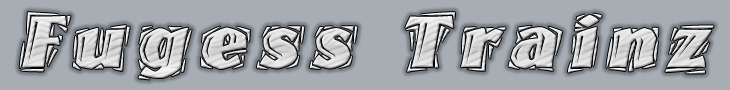
<style>
.page{position:relative;width:730px;height:90px;background:#a8adb4}
.page>*{position:absolute;margin:0}
.t1{font:88px "WestwoodLetPlain";letter-spacing:0.08em;color:#dddddd;font-weight:bold;font-style:italic}
</style>
<div class="page">
<p class="t1" style="left:19px;top:12px;width:695px;height:68px">Fugess Trainz</p>
</div>
